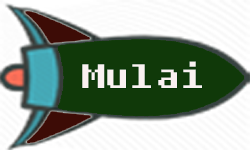
<style>
.page{position:relative;width:250px;height:150px;background:#103909}
.page>*{position:absolute;margin:0}
.t1{font:33.8px "Fixedsys";color:#f9f1f1;scale:1.19 1}
</style>
<div class="page">
<p class="t1" style="left:82px;top:61px;width:120px;height:27px">Mulai</p>
</div>
